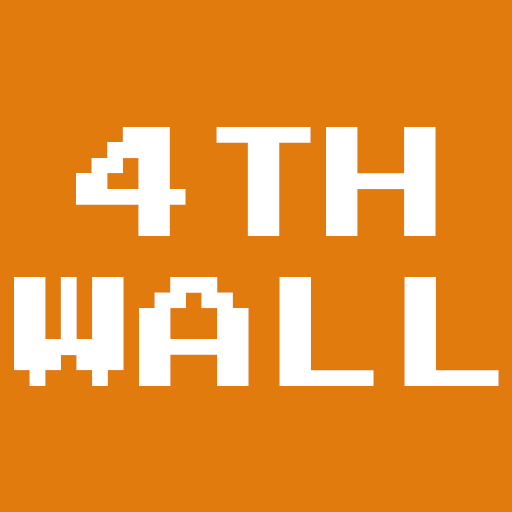
<style>
.page{position:relative;width:512px;height:512px;background:#e17b0d}
.page>*{position:absolute;margin:0}
.t1{font:125px "PressStart2P-Regular";color:#ffffff}
</style>
<div class="page">
<p class="t1" style="left:14px;top:127px;width:485px;height:259px;text-align:center">4TH<br>WALL</p>
</div>
